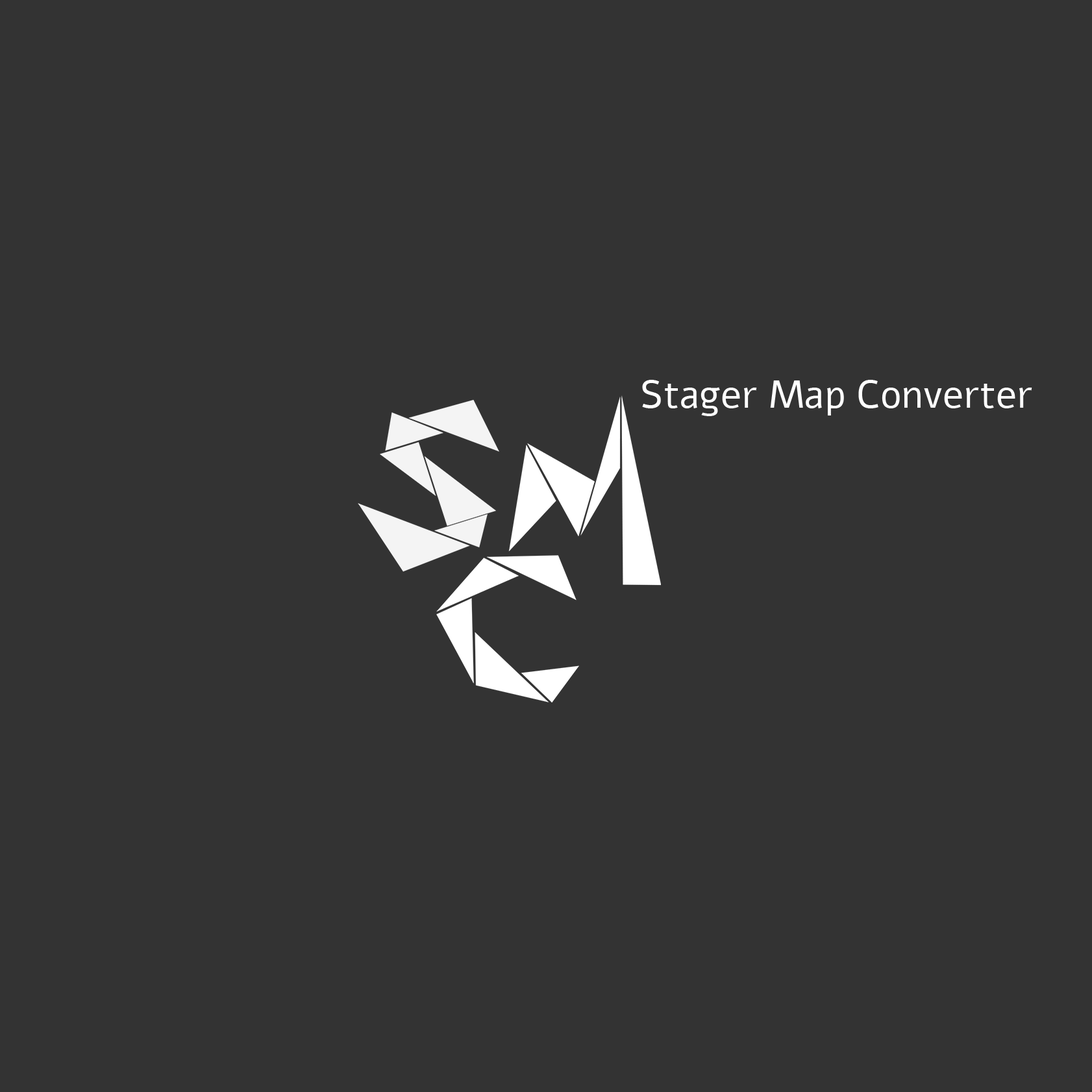
<style>
.page{position:relative;width:1092px;height:1092px;background:#333333}
.page>*{position:absolute;margin:0}
.t1{font:39px "Alef-Regular";color:#ffffff}
</style>
<div class="page">
<p class="t1" style="left:642px;top:380px;width:390px;height:36px">Stager Map Converter</p>
</div>
